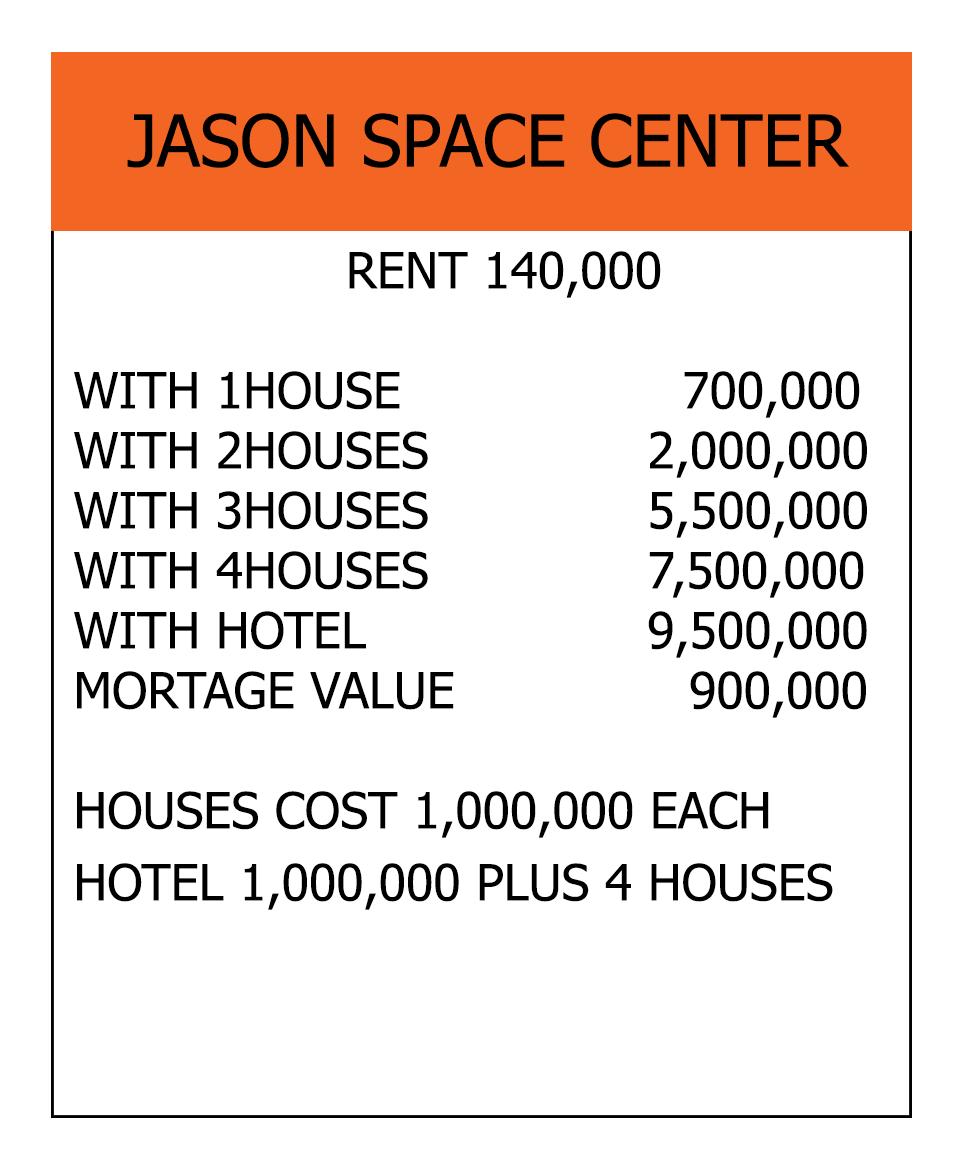
<style>
.page{position:relative;width:966px;height:1164px;background:#ffffff}
.page>*{position:absolute;margin:0}
.t1{font:72px "Tahoma";color:#000000}
.t2{font:50px "Tahoma";color:#010000}
</style>
<div class="page">
<p class="t1" style="left:127px;top:113px;width:722px;height:55px">JASON SPACE CENTER</p>
<p class="t2" style="left:74px;top:251px;width:793px;height:659px;text-align:center">RENT 140,000<br><br>WITH 1HOUSE                  700,000<br>WITH 2HOUSES              2,000,000<br>WITH 3HOUSES              5,500,000<br>WITH 4HOUSES              7,500,000<br>WITH HOTEL                  9,500,000<br>MORTAGE VALUE               900,000<br><br>HOUSES COST 1,000,000 EACH<br>HOTEL 1,000,000 PLUS 4 HOUSES</p>
</div>
